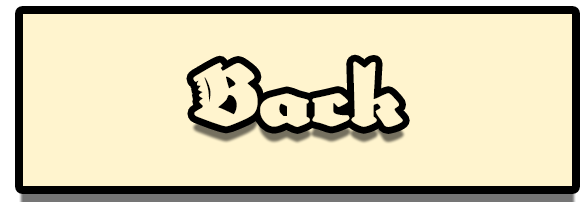
<style>
.page{position:relative;width:582px;height:202px;background:#fff4ce}
.page>*{position:absolute;margin:0}
.t1{font:79.9px "Neptun";color:#fff4ce}
</style>
<div class="page">
<p class="t1" style="left:193px;top:61px;width:210px;height:66px">Back</p>
</div>
